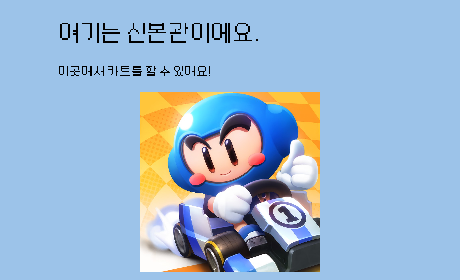
<style>
.page{position:relative;width:460px;height:280px;background:#9cc3e9}
.page>*{position:absolute;margin:0}
.t1{font:16px "PF½ºÅ¸´õ½ºÆ®S";color:#000000}
.t2{font:30px "PF½ºÅ¸´õ½ºÆ®S";color:#000000}
</style>
<div class="page">
<p class="t1" style="left:59px;top:23px;width:199px;height:53px"><span class="t2">여기는 신본관이에요.<br><br></span>이곳에서 카트를 할 수 있어요!</p>
</div>
